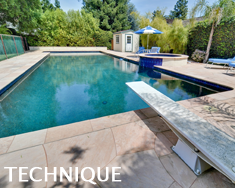
<style>
.page{position:relative;width:235px;height:188px}
.page>*{position:absolute;margin:0}
.t1{font:20px "LucidaSansUnicode";color:#ffffff;font-weight:bold}
</style>
<div class="page">
<p class="t1" style="left:4px;top:167px;width:118px;height:18px">TECHNIQUE</p>
</div>
